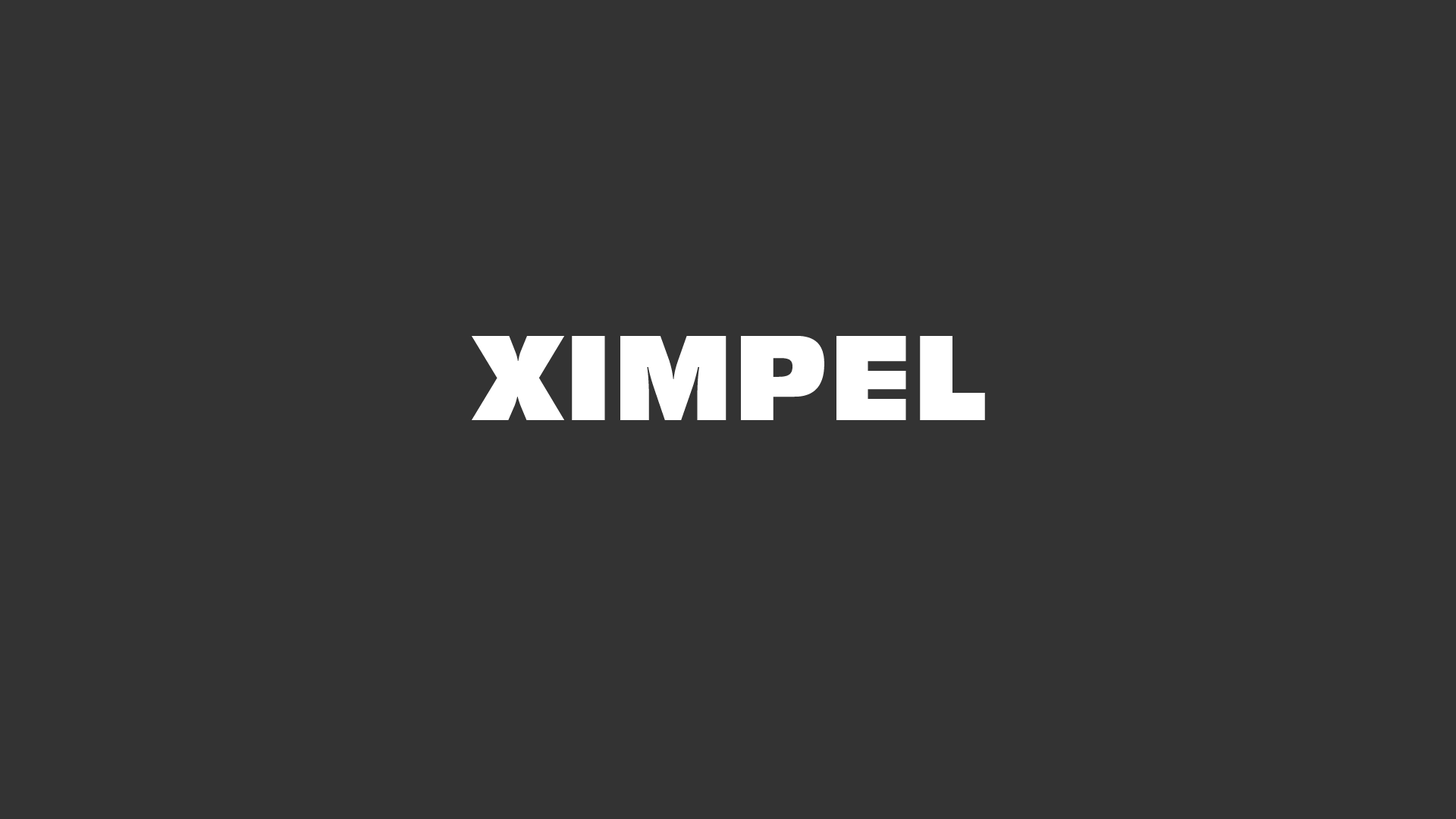
<style>
.page{position:relative;width:1456px;height:819px;background:#333333}
.page>*{position:absolute;margin:0}
.t1{font:113.7px "Incised901BT-Compact";color:#ffffff}
</style>
<div class="page">
<p class="t1" style="left:472px;top:336px;width:513px;height:84px">XIMPEL</p>
</div>
